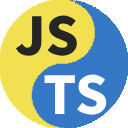
<style>
.page{position:relative;width:128px;height:128px;background:#3478c6}
.page>*{position:absolute;margin:0}
.t1{font:52px "SourceHanSansSC-Heavy";color:#252623}
.t2{font:52px "SourceHanSansSC-Heavy";color:#ffffff}
</style>
<div class="page">
<p class="t1" style="left:15px;top:15px;width:62px;height:41px">JS</p>
<p class="t2" style="left:44px;top:74px;width:63px;height:41px">TS</p>
</div>
